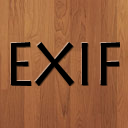
<style>
.page{position:relative;width:128px;height:128px}
.page>*{position:absolute;margin:0}
.t1{font:60px "LithosPro-Regular";letter-spacing:-0.075em;color:#000000}
</style>
<div class="page">
<p class="t1" style="left:10px;top:42px;width:110px;height:44px">EXIF</p>
</div>
